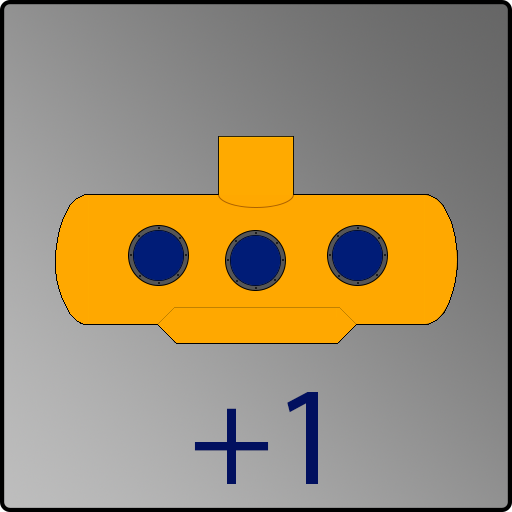
<style>
.page{position:relative;width:512px;height:512px}
.page>*{position:absolute;margin:0}
.t1{font:141.7px "MyriadPro-Regular";color:#01105f}
</style>
<div class="page">
<p class="t1" style="left:194px;top:392px;width:124px;height:92px">+1</p>
</div>
